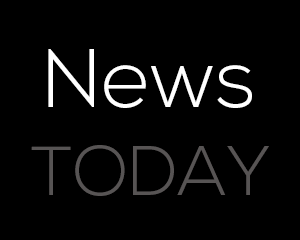
<style>
.page{position:relative;width:300px;height:240px;background:#000000}
.page>*{position:absolute;margin:0}
.t1{font:83.4px "NexaLight";color:#ffffff}
.t2{font:69.5px "NexaLight";color:#575454}
</style>
<div class="page">
<p class="t1" style="left:48px;top:49px;width:204px;height:59px">News</p>
<p class="t2" style="left:31px;top:145px;width:238px;height:51px">TODAY</p>
</div>
